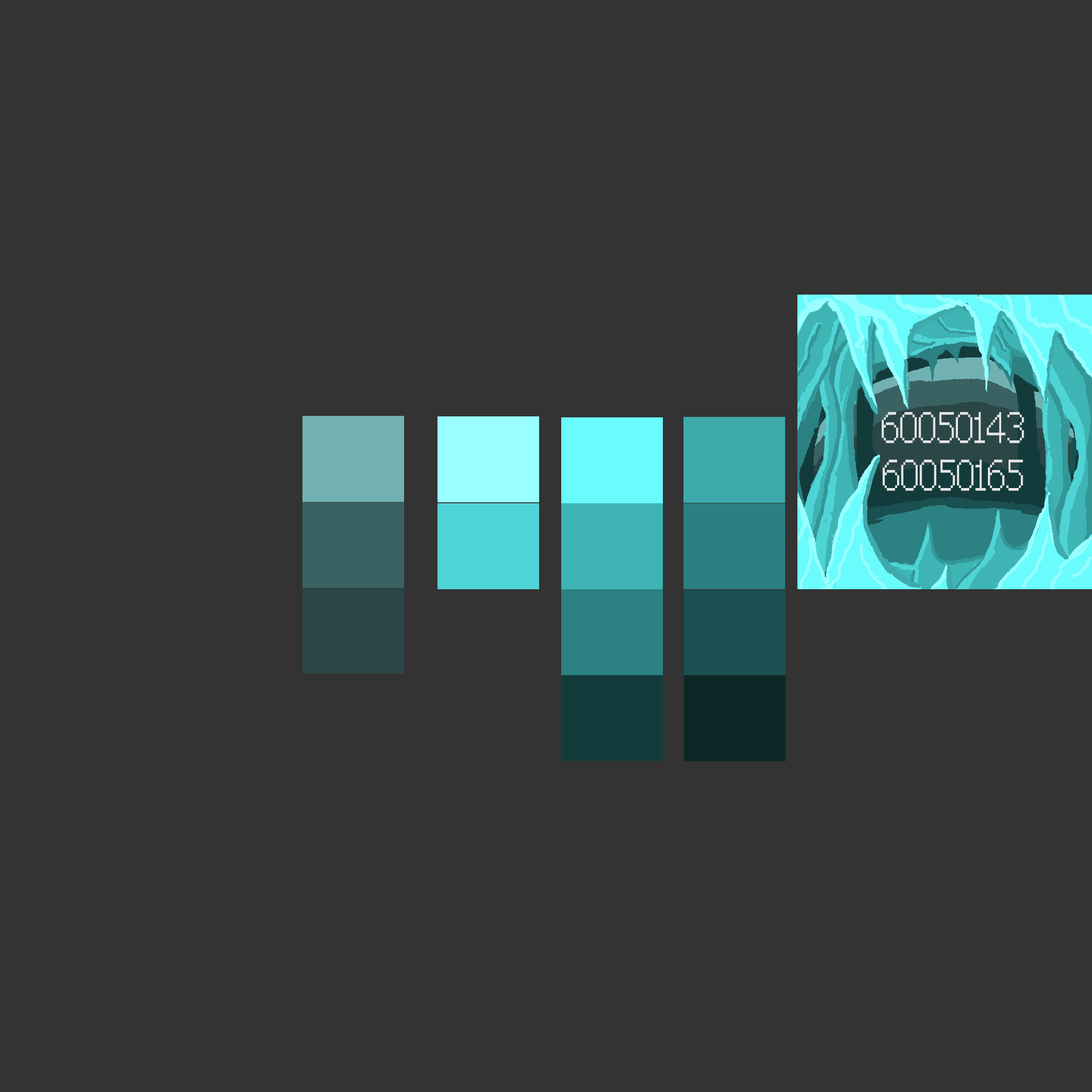
<style>
.page{position:relative;width:1092px;height:1092px;background:#333333}
.page>*{position:absolute;margin:0}
.t1{font:20.6px "pix-PixelFJVerdana12pt-Regular";color:#e6e6e6;scale:0.8 1}
</style>
<div class="page">
<p class="t1" style="left:881px;top:412px;width:143px;height:31px">60050143</p>
<p class="t1" style="left:882px;top:460px;width:141px;height:31px">60050165</p>
</div>
